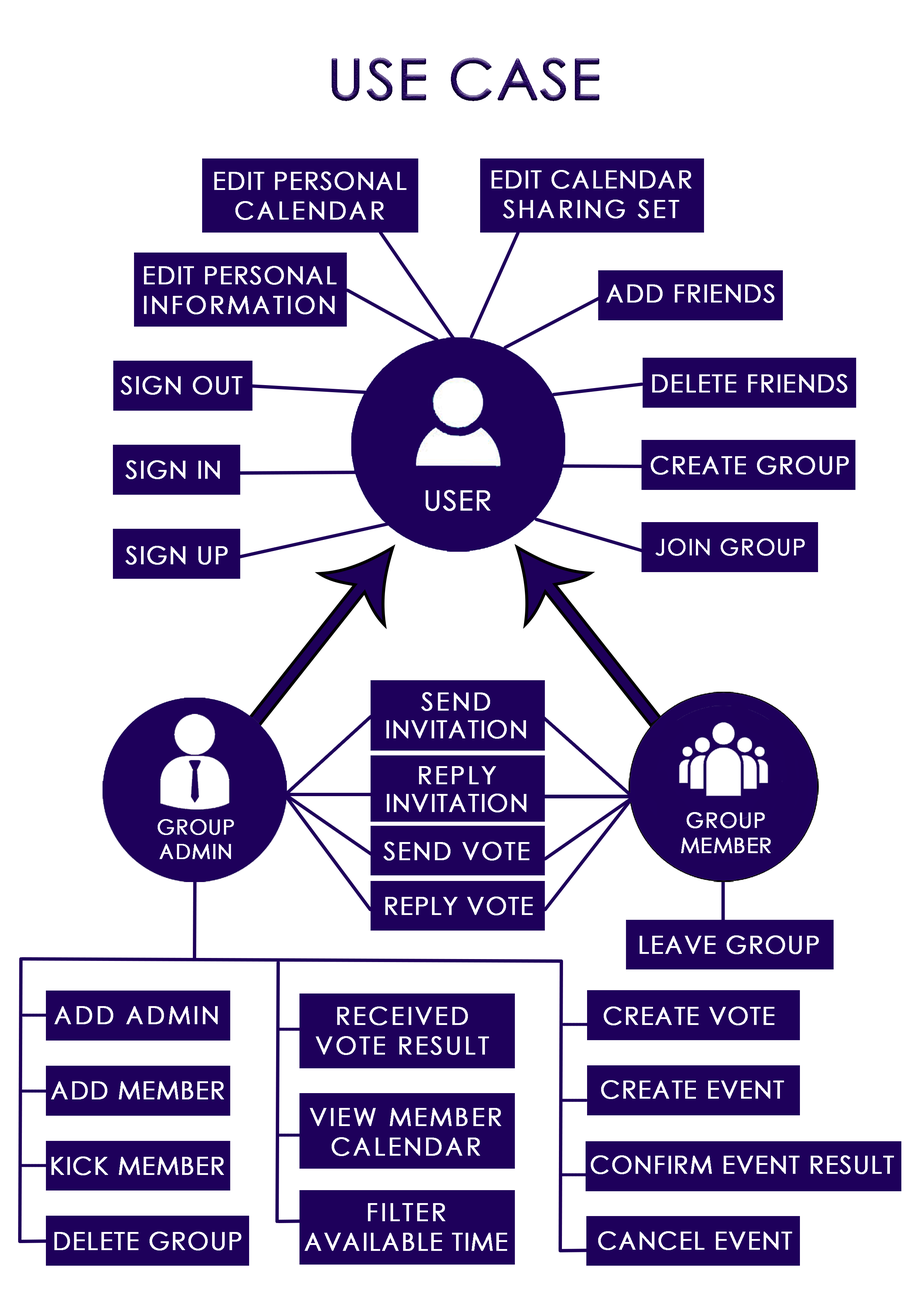
<style>
.page{position:relative;width:918px;height:1299px;background:#ffffff}
.page>*{position:absolute;margin:0}
.t1{font:55.5px "CenturyGothic";letter-spacing:0.025em;text-transform:uppercase;font-weight:bold}
.t2{font:24.7px "CenturyGothic";letter-spacing:0.025em;color:#ffffff;text-transform:uppercase;font-weight:bold}
.t3{font:24.7px "CenturyGothic";letter-spacing:0.075em;color:#ffffff;text-transform:uppercase;font-weight:bold}
.t4{font:27.8px "CenturyGothic";letter-spacing:0.025em;color:#ffffff;text-transform:uppercase;font-weight:bold}
.t5{font:22.7px "CenturyGothic";letter-spacing:0.025em;color:#ffffff;text-transform:uppercase;font-weight:bold}
.t6{font:24.7px/27.8px "CenturyGothic";letter-spacing:0.025em;color:#ffffff;text-transform:uppercase;font-weight:bold}
.t7{font:24.7px/27.8px "CenturyGothic";letter-spacing:0.075em;color:#ffffff;text-transform:uppercase;font-weight:bold}
.t8{font:20.4px "CenturyGothic";letter-spacing:0.025em;color:#ffffff;text-transform:uppercase;font-weight:bold}
.t9{font:21.1px "CenturyGothic";letter-spacing:0.025em;color:#ffffff;text-transform:uppercase;font-weight:bold}
.t10{font:24.7px "CenturyGothic";letter-spacing:0.05em;color:#ffffff;text-transform:uppercase;font-weight:bold}
</style>
<div class="page">
<p class="t1" style="left:332px;top:57px;width:267px;height:44px">use case</p>
<p class="t2" style="left:214px;top:171px;width:193px;height:49px;text-align:center">Edit personal<br><span class="t3">calendar</span></p>
<p class="t2" style="left:492px;top:170px;width:200px;height:48px;text-align:center">edit calendar<br><span class="t3">sharing set</span></p>
<p class="t2" style="left:144px;top:266px;width:193px;height:48px">Edit Personal<br><span class="t3">Information</span></p>
<p class="t2" style="left:606px;top:284px;width:169px;height:19px">add friends</p>
<p class="t2" style="left:121px;top:376px;width:121px;height:19px">Sign Out</p>
<p class="t2" style="left:652px;top:374px;width:195px;height:19px">delete friends</p>
<p class="t2" style="left:126px;top:460px;width:94px;height:19px">Sign In</p>
<p class="t2" style="left:651px;top:456px;width:198px;height:19px">create group</p>
<p class="t4" style="left:426px;top:490px;width:65px;height:21px">user</p>
<p class="t2" style="left:126px;top:546px;width:102px;height:19px">Sign up</p>
<p class="t5" style="left:656px;top:538px;width:149px;height:18px">join group</p>
<p class="t6" style="left:387px;top:692px;width:139px;height:47px;text-align:center"><span class="t7">Send<br></span>invitation</p>
<p class="t6" style="left:387px;top:766px;width:139px;height:46px;text-align:center"><span class="t7">reply<br></span>invitation</p>
<p class="t8" style="left:158px;top:819px;width:76px;height:40px;text-align:center">group<br>admin</p>
<p class="t9" style="left:681px;top:812px;width:90px;height:41px;text-align:center">group<br>member</p>
<p class="t10" style="left:384px;top:842px;width:145px;height:18px">Send Vote</p>
<p class="t2" style="left:385px;top:896px;width:148px;height:19px">reply vote</p>
<p class="t2" style="left:640px;top:935px;width:179px;height:19px">LEAVE GROUP</p>
<p class="t3" style="left:54px;top:1006px;width:164px;height:18px">add admin</p>
<p class="t3" style="left:316px;top:1006px;width:173px;height:49px;text-align:center">received<br>vote result</p>
<p class="t2" style="left:604px;top:1006px;width:171px;height:19px">create vote</p>
<p class="t2" style="left:51px;top:1081px;width:173px;height:18px">add member</p>
<p class="t2" style="left:601px;top:1080px;width:183px;height:19px">create event</p>
<p class="t3" style="left:310px;top:1108px;width:191px;height:48px;text-align:center">view member<br>calendar</p>
<p class="t2" style="left:51px;top:1156px;width:173px;height:19px">kick member</p>
<p class="t2" style="left:591px;top:1155px;width:303px;height:19px">confirm event result</p>
<p class="t2" style="left:305px;top:1203px;width:202px;height:48px;text-align:center"><span class="t3">Filter<br></span>available time</p>
<p class="t2" style="left:54px;top:1231px;width:187px;height:19px">delete group</p>
<p class="t2" style="left:598px;top:1231px;width:194px;height:19px">cancel event</p>
</div>
